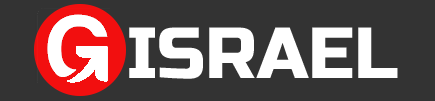
<style>
.page{position:relative;width:435px;height:101px;background:#333333}
.page>*{position:absolute;margin:0}
.t1{font:72px "RussoOne-Regular";color:#ffffff}
</style>
<div class="page">
<p class="t1" style="left:129px;top:27px;width:269px;height:52px">ISRAEL</p>
</div>
